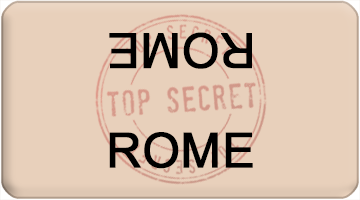
<style>
.page{position:relative;width:360px;height:200px;background:#e8d0bb}
.page>*{position:absolute;margin:0}
.t1{font:48px "ArialMT";color:#000000;font-weight:bold}
</style>
<div class="page">
<p class="t1" style="left:109px;top:32px;width:143px;height:37px;rotate:180deg">ROME</p>
<p class="t1" style="left:109px;top:132px;width:144px;height:37px">ROME</p>
</div>
